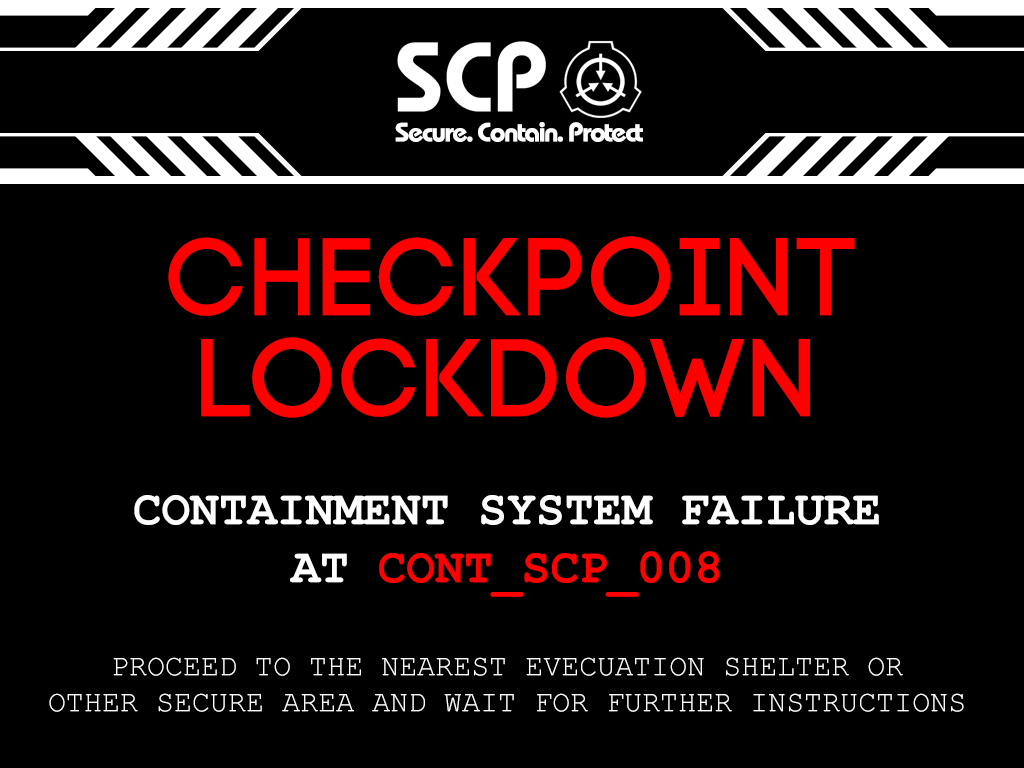
<style>
.page{position:relative;width:1024px;height:768px;background:#000000}
.page>*{position:absolute;margin:0}
.t1{font:27px "BauhausBold";color:#ffffff}
.t2{font:110px "MyriadPro-Regular";color:#ff0000}
.t3{font:48px "CourierNewPS-BoldMT";color:#ffffff}
.t4{font:48px "CourierNewPS-BoldMT";color:#ff0000}
.t5{font:30px "CourierNewPSMT";color:#ffffff}
</style>
<div class="page">
<p class="t1" style="left:395px;top:122px;width:248px;height:20px">Secure. Contain. Protect</p>
<p class="t2" style="left:168px;top:236px;width:687px;height:81px">CHECKPOINT</p>
<p class="t2" style="left:201px;top:337px;width:609px;height:81px">LOCKDOWN</p>
<p class="t3" style="left:134px;top:495px;width:745px;height:30px">CONTAINMENT SYSTEM FAILURE</p>
<p class="t4" style="left:290px;top:551px;width:430px;height:46px"><span class="t3">AT </span>CONT_SCP_008</p>
<p class="t5" style="left:49px;top:657px;width:915px;height:55px;text-align:center">PROCEED TO THE NEAREST EVECUATION SHELTER OR<br>OTHER SECURE AREA AND WAIT FOR FURTHER INSTRUCTIONS</p>
</div>
